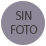
<style>
.page{position:relative;width:46px;height:46px;background:#8d8898}
.page>*{position:absolute;margin:0}
.t1{font:12px "MyriadPro-Regular";color:#454545}
</style>
<div class="page">
<p class="t1" style="left:11px;top:11px;width:27px;height:23px;text-align:center">SIN<br>FOTO</p>
</div>
